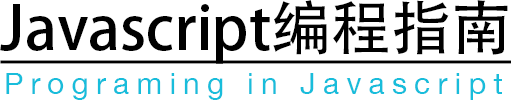
<style>
.page{position:relative;width:511px;height:100px;background:#ffffff}
.page>*{position:absolute;margin:0}
.t1{font:60px "AdobeHeitiStd-Regular";color:#000000;text-decoration:underline}
.t2{font:30px "HelveticaNeue";letter-spacing:0.24em;color:#18bddb}
</style>
<div class="page">
<p class="t1" style="left:0px;top:0px;width:512px;height:64px">Javascript编程指南</p>
<p class="t2" style="left:6px;top:73px;width:496px;height:27px">Programing in Javascript</p>
</div>
